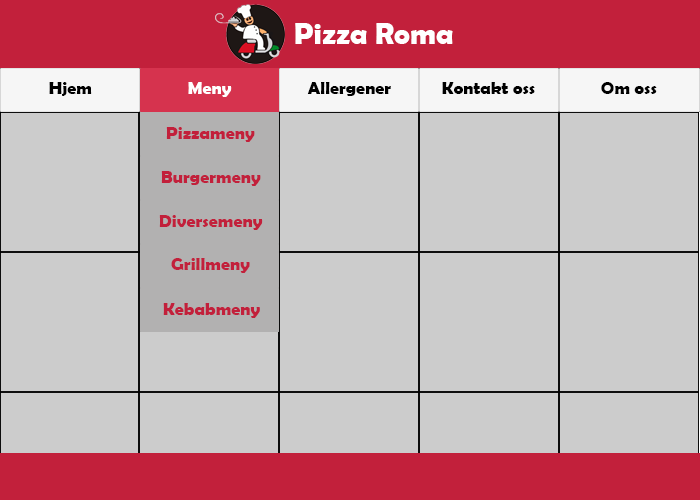
<style>
.page{position:relative;width:700px;height:500px;background:#cccccc}
.page>*{position:absolute;margin:0}
.t1{font:30px "BerlinSansFBDemi-Bold";color:#ffffff}
.t2{font:18px "BerlinSansFBDemi-Bold";color:#000000}
.t3{font:18px "BerlinSansFBDemi-Bold";color:#ffffff}
.t4{font:18px "BerlinSansFBDemi-Bold";color:#c2203b}
</style>
<div class="page">
<p class="t1" style="left:295px;top:23px;width:158px;height:21px">Pizza Roma</p>
<p class="t2" style="left:49px;top:82px;width:43px;height:14px">Hjem</p>
<p class="t3" style="left:188px;top:82px;width:44px;height:15px">Meny</p>
<p class="t2" style="left:307px;top:82px;width:84px;height:14px">Allergener</p>
<p class="t2" style="left:442px;top:82px;width:93px;height:12px">Kontakt oss</p>
<p class="t2" style="left:601px;top:82px;width:56px;height:12px">Om oss</p>
<p class="t4" style="left:166px;top:127px;width:89px;height:15px">Pizzameny</p>
<p class="t4" style="left:161px;top:171px;width:100px;height:15px">Burgermeny</p>
<p class="t4" style="left:159px;top:215px;width:104px;height:15px">Diversemeny</p>
<p class="t4" style="left:171px;top:258px;width:79px;height:15px">Grillmeny</p>
<p class="t4" style="left:163px;top:303px;width:97px;height:15px">Kebabmeny</p>
</div>
